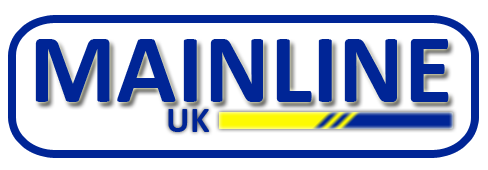
<style>
.page{position:relative;width:488px;height:170px;background:#ffffff}
.page>*{position:absolute;margin:0}
.t1{font:100px "Calibri-Bold";color:#002596}
.t2{font:36px "Calibri-Bold";color:#002596}
</style>
<div class="page">
<p class="t1" style="left:35px;top:39px;width:414px;height:63px">MAINLINE</p>
<p class="t2" style="left:168px;top:109px;width:42px;height:23px">UK</p>
</div>
